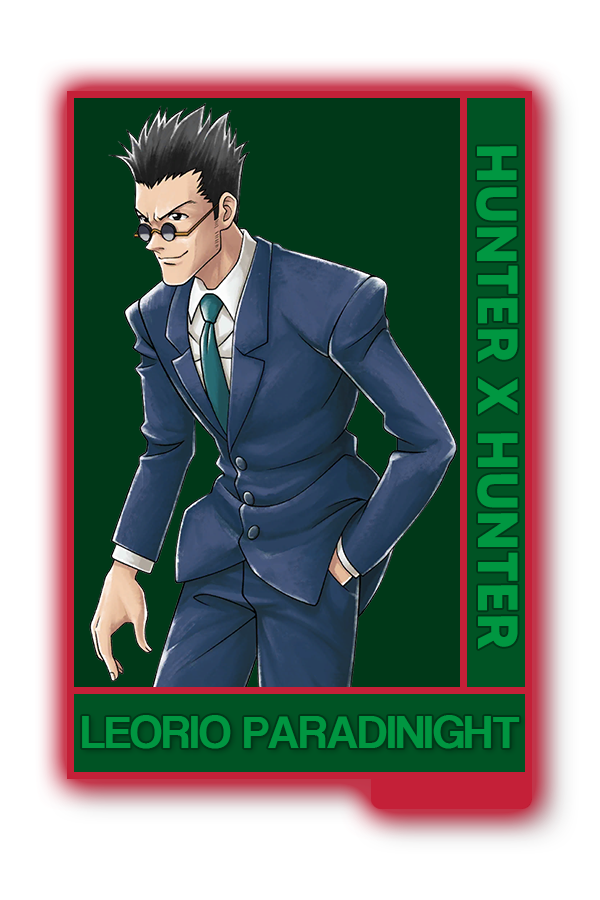
<style>
.page{position:relative;width:600px;height:900px;background:#ffffff}
.page>*{position:absolute;margin:0}
.t1{font:56.5px "MADETOMMY-Bold";color:#009741}
.t2{font:47.9px "CoolveticaRg-Regular";color:#009641}
</style>
<div class="page">
<p class="t1" style="left:476px;top:146px;width:42px;height:503px;rotate:90deg">HUNTER X HUNTER</p>
<p class="t2" style="left:82px;top:715px;width:438px;height:34px">LEORIO PARADINIGHT</p>
</div>
